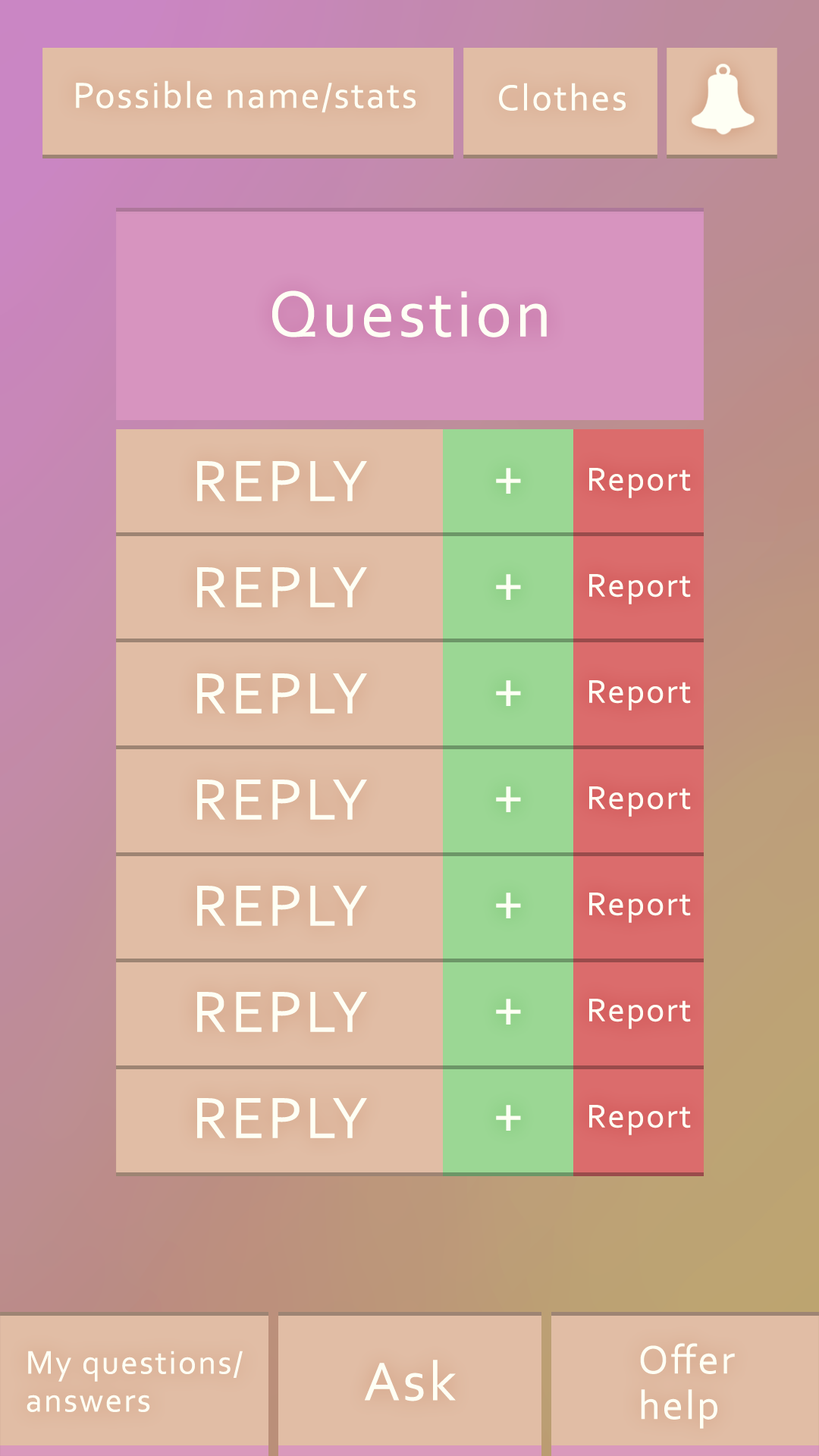
<style>
.page{position:relative;width:819px;height:1456px}
.page>*{position:absolute;margin:0}
.t1{font:37.9px "Corbel";letter-spacing:0.05em;color:#fefff4}
.t2{font:68.2px "Corbel";letter-spacing:0.05em;color:#fefff4}
.t3{font:60.7px/106.2px "Corbel";letter-spacing:0.05em;color:#fefff4}
.t4{font:34.1px/106.2px "Corbel";letter-spacing:0.05em;color:#fefff4}
.t5{font:41.7px/45.5px "Corbel";letter-spacing:0.05em;color:#fefff4}
.t6{font:34.1px/37.9px "Corbel";letter-spacing:0.05em;color:#fefff4}
.t7{font:56.9px "Corbel";letter-spacing:0.05em;color:#fefff4}
</style>
<div class="page">
<p class="t1" style="left:76px;top:80px;width:340px;height:33px">Possible name/stats</p>
<p class="t1" style="left:499px;top:83px;width:127px;height:28px">Clothes</p>
<p class="t2" style="left:272px;top:290px;width:275px;height:47px">Question</p>
<p class="t3" style="left:197px;top:461px;width:170px;height:677px;text-align:center">REPLY<br>REPLY<br>REPLY<br>REPLY<br>REPLY<br>REPLY<br>REPLY</p>
<p class="t3" style="left:496px;top:468px;width:25px;height:663px;text-align:center">+<br>+<br>+<br>+<br>+<br>+<br>+</p>
<p class="t4" style="left:589px;top:468px;width:102px;height:667px;text-align:center">Report<br>Report<br>Report<br>Report<br>Report<br>Report<br>Report</p>
<p class="t5" style="left:640px;top:1343px;width:95px;height:86px">Offer<br>help</p>
<p class="t6" style="left:27px;top:1351px;width:216px;height:61px">My questions/<br>answers</p>
<p class="t7" style="left:365px;top:1360px;width:91px;height:41px">Ask</p>
</div>
